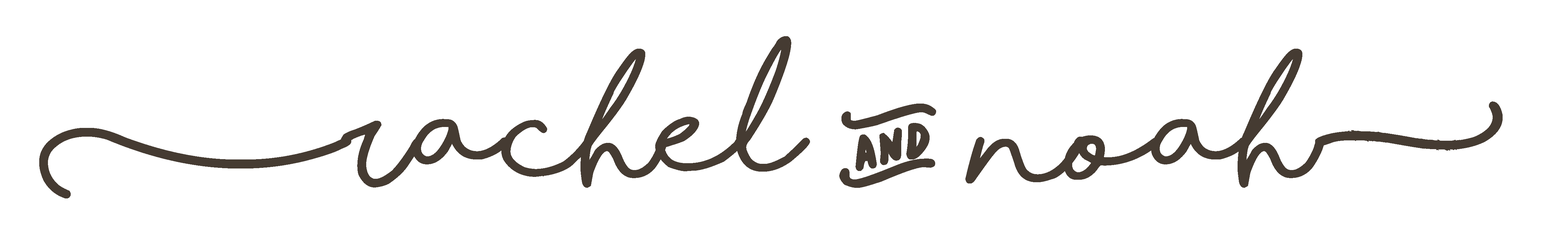
<style>
.page{position:relative;width:1568px;height:234px;background:#ffffff}
.page>*{position:absolute;margin:0}
.t1{font:129.8px "ShorelinesScriptBold";color:#453b32}
</style>
<div class="page">
<p class="t1" style="left:39px;top:36px;width:1464px;height:162px">(rachel &amp; noah]</p>
</div>
